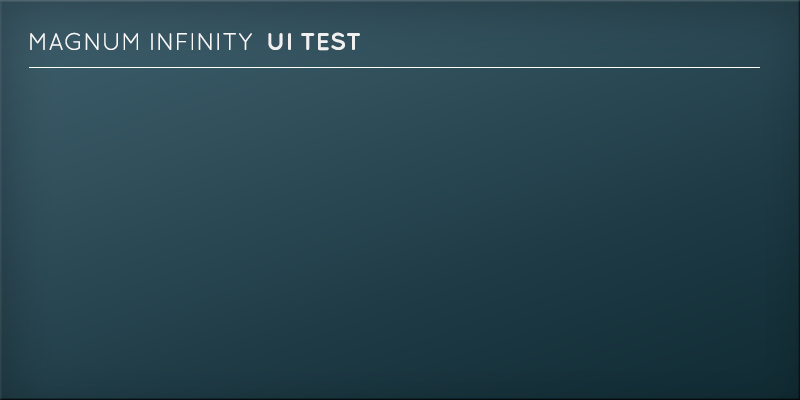
<style>
.page{position:relative;width:800px;height:400px}
.page>*{position:absolute;margin:0}
.t1{font:24px "QuicksandBook-Regular";color:#f0f0f0}
.t2{font:24px "QuicksandBold-Regular";color:#f0f0f0}
</style>
<div class="page">
<p class="t1" style="left:30px;top:32px;width:222px;height:18px">MAGNUM INFINITY</p>
<p class="t2" style="left:268px;top:32px;width:92px;height:19px">UI TEST</p>
</div>
